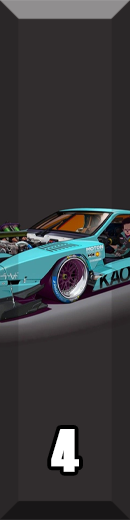
<style>
.page{position:relative;width:130px;height:520px;background:#312d2e}
.page>*{position:absolute;margin:0}
.t1{font:60px "Haettenschweiler";color:#ffffff;font-weight:bold}
</style>
<div class="page">
<p class="t1" style="left:51px;top:429px;width:28px;height:43px">4</p>
</div>
